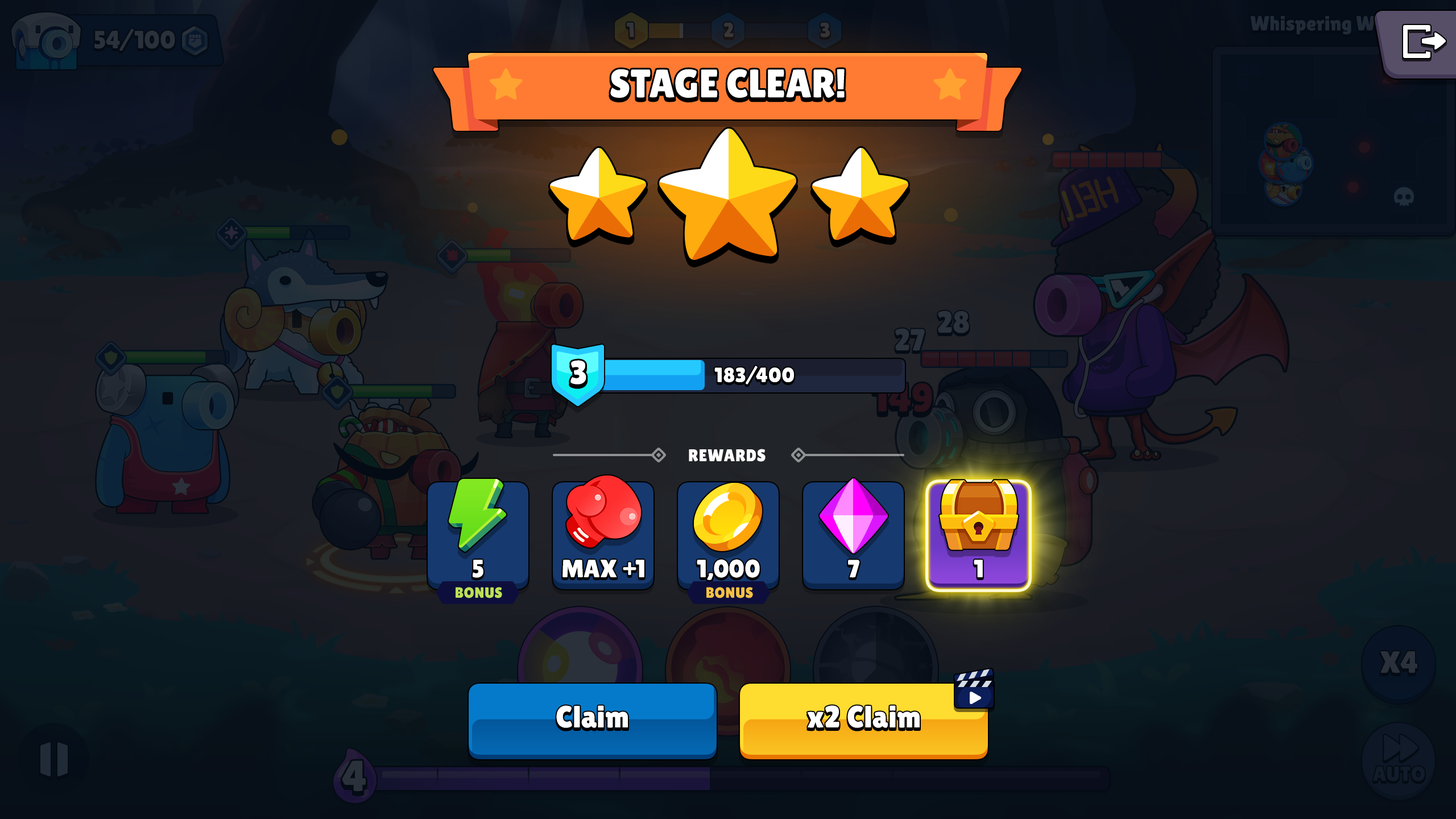
<style>
.page{position:relative;width:1456px;height:819px}
.page>*{position:absolute;margin:0}
.t1{font:39.8px "LilitaOne";color:#ffffff;text-transform:uppercase}
.t2{font:33px "LilitaOne";color:#ffffff}
.t3{font:20.5px "LilitaOne";letter-spacing:0.02em;color:#ffffff}
.t4{font:17.1px "LilitaOne";color:#ffffff;text-transform:uppercase}
.t5{font:25px "LilitaOne";color:#ffffff;text-transform:uppercase}
.t6{font:14.8px "LilitaOne";color:#bce056;text-transform:uppercase}
.t7{font:14.8px "LilitaOne";color:#f5c142;text-transform:uppercase}
.t8{font:30.7px "LilitaOne";letter-spacing:0.02em;color:#ffffff}
</style>
<div class="page">
<p class="t1" style="left:610px;top:69px;width:235px;height:29px">Stage Clear!</p>
<p class="t2" style="left:570px;top:360px;width:16px;height:24px">3</p>
<p class="t3" style="left:714px;top:366px;width:80px;height:18px">183/400</p>
<p class="t4" style="left:689px;top:449px;width:77px;height:13px">Rewards</p>
<p class="t5" style="left:473px;top:560px;width:10px;height:18px">5</p>
<p class="t5" style="left:562px;top:560px;width:82px;height:17px">max +1</p>
<p class="t5" style="left:697px;top:559px;width:63px;height:21px">1,000</p>
<p class="t5" style="left:848px;top:560px;width:12px;height:18px">7</p>
<p class="t5" style="left:974px;top:560px;width:9px;height:17px">1</p>
<p class="t6" style="left:456px;top:587px;width:46px;height:11px">Bonus</p>
<p class="t7" style="left:706px;top:587px;width:47px;height:11px">Bonus</p>
<p class="t8" style="left:556px;top:705px;width:72px;height:23px">Claim</p>
<p class="t8" style="left:807px;top:705px;width:113px;height:23px">x2 Claim</p>
</div>
